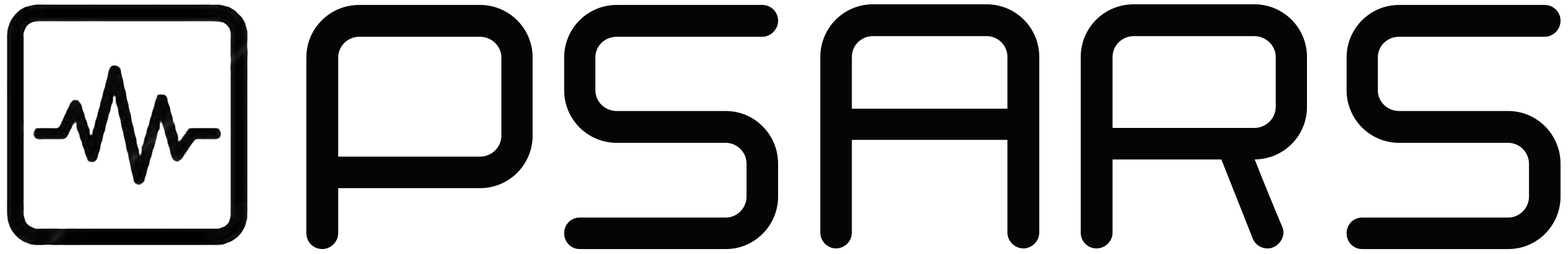
<style>
.page{position:relative;width:1568px;height:254px;background:#ffffff}
.page>*{position:absolute;margin:0}
.t1{font:305.6px "Neogrey-Medium";color:#050505}
</style>
<div class="page">
<p class="t1" style="left:306px;top:4px;width:1255px;height:246px">PSARS</p>
</div>
